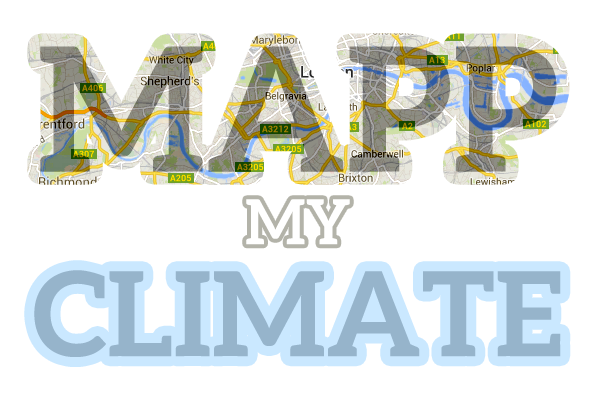
<style>
.page{position:relative;width:590px;height:400px;background:#ffffff}
.page>*{position:absolute;margin:0}
.t1{font:62.2px "Aleo-Bold";color:#ffffff}
.t2{font:117.2px "Aleo-Bold";color:#96b4cb}
</style>
<div class="page">
<p class="t1" style="left:246px;top:199px;width:104px;height:46px">MY</p>
<p class="t2" style="left:34px;top:270px;width:527px;height:87px">CLIMATE</p>
</div>
